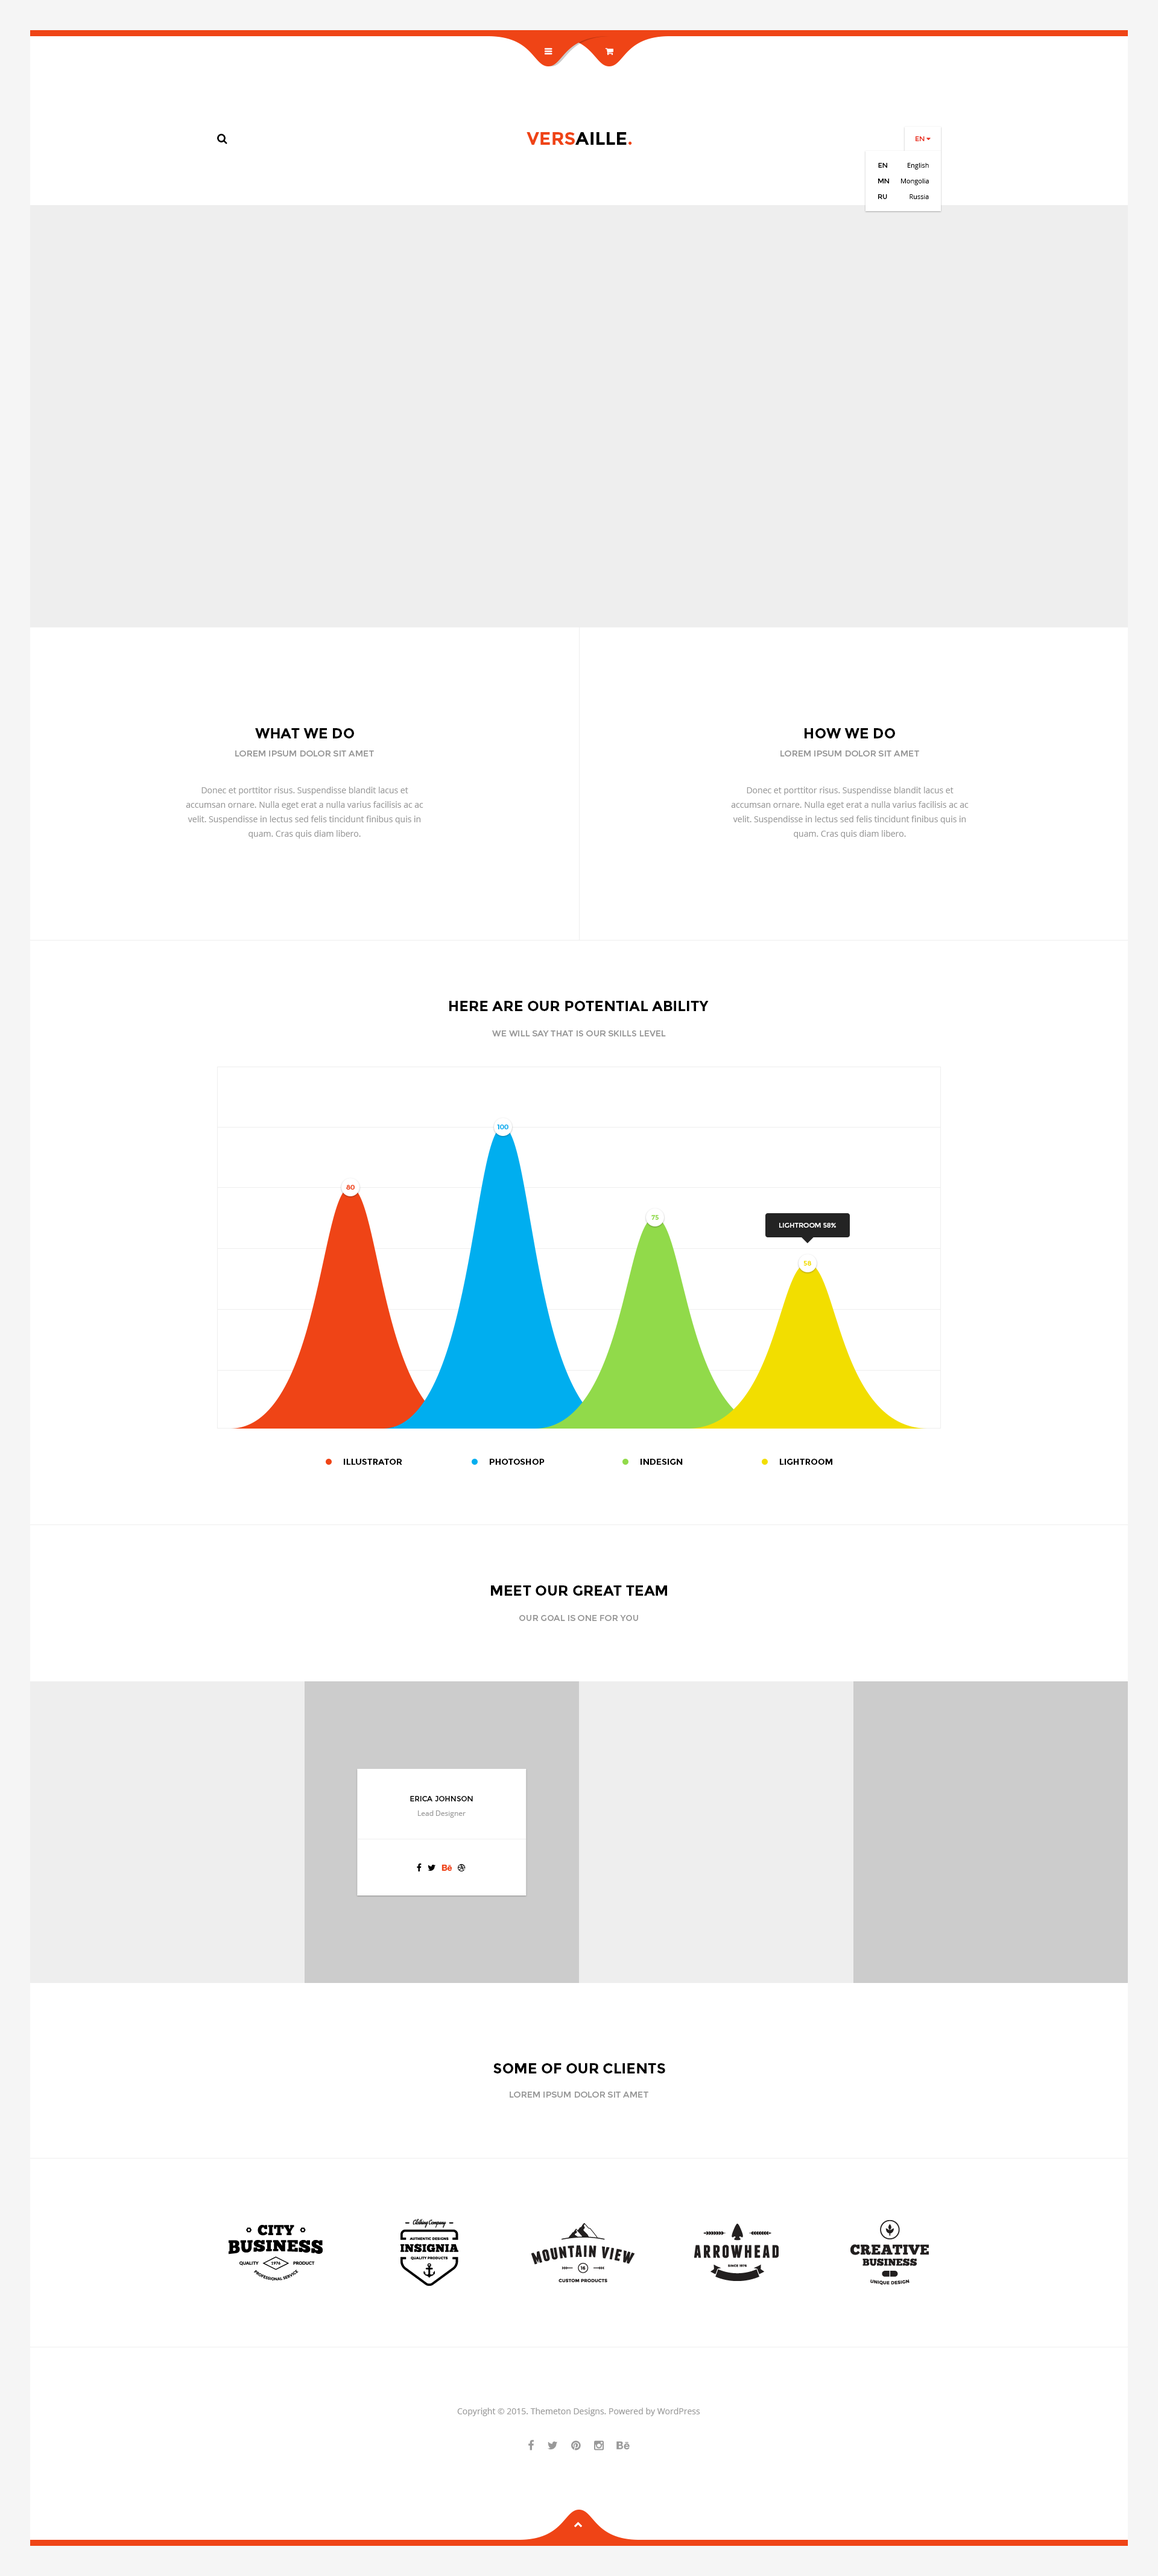
<style>
.page{position:relative;width:1158px;height:2576px;background:#ffffff}
.page>*{position:absolute;margin:0}
.t1{font:18.1px "Montserrat-Bold";color:#000000}
.t2{font:18.1px "Montserrat-Bold";color:#ef4416}
.t3{font:6.6px "Montserrat-Regular";color:#000000}
.t4{font:6.6px "OpenSans";color:#000000}
.t5{font:14.5px "Montserrat-Bold";color:#000000}
.t6{font:8.4px "Montserrat-Regular";color:#999999;text-transform:uppercase}
.t7{font:8.4px/14.5px "OpenSans";color:#999999}
.t8{font:8.4px "Montserrat-Regular";color:#999999}
.t9{font:6.6px "Montserrat-Bold";color:#00aeef}
.t10{font:6.6px "Montserrat-Bold";color:#ef4416}
.t11{font:6.6px "Montserrat-Bold";color:#91da4a}
.t12{font:6.6px "Montserrat-Regular";color:#ffffff}
.t13{font:6.6px "Montserrat-Bold";color:#f2de00}
.t14{font:8.4px "Montserrat-Bold";color:#000000}
.t15{font:7.2px "Montserrat-Regular";color:#000000}
.t16{font:7.2px "OpenSans";color:#999999}
.t17{font:8.4px "OpenSans";color:#999999}
</style>
<div class="page">
<p class="t1" style="left:527px;top:132px;width:105px;height:13px"><span class="t2">VERS</span>AILLE<span class="t2">.</span></p>
<p class="t3" style="left:878px;top:163px;width:9px;height:5px">EN</p>
<p class="t4" style="left:908px;top:163px;width:21px;height:7px">English</p>
<p class="t3" style="left:878px;top:179px;width:11px;height:4px">MN</p>
<p class="t4" style="left:901px;top:179px;width:28px;height:6px">Mongolia</p>
<p class="t3" style="left:878px;top:194px;width:9px;height:5px">RU</p>
<p class="t4" style="left:910px;top:194px;width:19px;height:5px">Russia</p>
<p class="t5" style="left:255px;top:728px;width:99px;height:10px">WHAT WE DO</p>
<p class="t5" style="left:805px;top:728px;width:90px;height:10px">HOW WE DO</p>
<p class="t6" style="left:235px;top:750px;width:139px;height:7px">Lorem ipsum dolor sit amet</p>
<p class="t6" style="left:781px;top:750px;width:138px;height:7px">Lorem ipsum dolor sit amet</p>
<p class="t7" style="left:186px;top:787px;width:238px;height:52px;text-align:center">Donec et porttitor risus. Suspendisse blandit lacus et accumsan ornare. Nulla eget erat a nulla varius facilisis ac ac velit. Suspendisse in lectus sed felis tincidunt finibus quis in quam. Cras quis diam libero.</p>
<p class="t7" style="left:731px;top:787px;width:238px;height:52px;text-align:center">Donec et porttitor risus. Suspendisse blandit lacus et accumsan ornare. Nulla eget erat a nulla varius facilisis ac ac velit. Suspendisse in lectus sed felis tincidunt finibus quis in quam. Cras quis diam libero.</p>
<p class="t5" style="left:449px;top:1001px;width:260px;height:10px">HERE ARE OUR POTENTIAL ABILITY</p>
<p class="t8" style="left:492px;top:1030px;width:174px;height:6px">WE WILL SAY THAT IS OUR SKILLS LEVEL</p>
<p class="t9" style="left:497px;top:1125px;width:12px;height:4px">100</p>
<p class="t10" style="left:346px;top:1185px;width:9px;height:5px">80</p>
<p class="t11" style="left:652px;top:1215px;width:7px;height:5px">75</p>
<p class="t12" style="left:779px;top:1223px;width:57px;height:5px">LIGHTROOM 58%</p>
<p class="t13" style="left:804px;top:1261px;width:7px;height:5px">58</p>
<p class="t14" style="left:344px;top:1459px;width:58px;height:6px">ILLUSTRATOR</p>
<p class="t14" style="left:490px;top:1459px;width:55px;height:6px">PHOTOSHOP</p>
<p class="t14" style="left:641px;top:1459px;width:42px;height:6px">INDESIGN</p>
<p class="t14" style="left:780px;top:1459px;width:53px;height:6px">LIGHTROOM</p>
<p class="t5" style="left:491px;top:1585px;width:176px;height:11px">MEET OUR GREAT TEAM</p>
<p class="t8" style="left:519px;top:1615px;width:119px;height:6px">OUR GOAL IS ONE FOR YOU</p>
<p class="t15" style="left:410px;top:1796px;width:63px;height:5px">ERICA JOHNSON</p>
<p class="t16" style="left:418px;top:1810px;width:48px;height:8px">Lead Designer</p>
<p class="t5" style="left:493px;top:2063px;width:172px;height:10px">SOME OF OUR CLIENTS</p>
<p class="t6" style="left:510px;top:2092px;width:139px;height:6px">Lorem ipsum dolor sit amet</p>
<p class="t17" style="left:457px;top:2408px;width:243px;height:8px">Copyright © 2015. Themeton Designs. Powered by WordPress</p>
</div>
